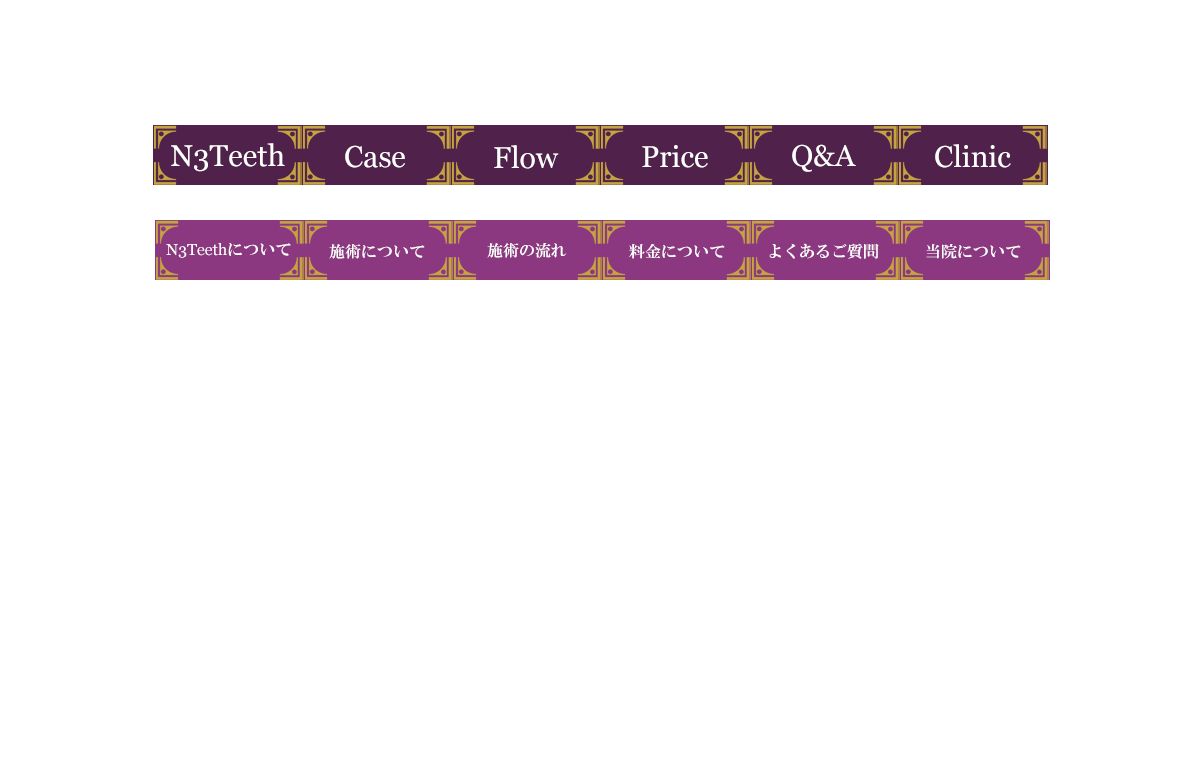
<style>
.page{position:relative;width:1200px;height:768px;background:#ffffff}
.page>*{position:absolute;margin:0}
.t1{font:30px "Georgia";color:#ffffff}
.t2{font:16px "Georgia";color:#ffffff}
.t3{font:16px "HGMinchoE";color:#ffffff}
</style>
<div class="page">
<p class="t1" style="left:171px;top:143px;width:114px;height:29px">N3Teeth</p>
<p class="t1" style="left:345px;top:145px;width:60px;height:23px">Case</p>
<p class="t1" style="left:494px;top:145px;width:65px;height:24px">Flow</p>
<p class="t1" style="left:642px;top:145px;width:66px;height:23px">Price</p>
<p class="t1" style="left:792px;top:144px;width:64px;height:28px">Q&amp;A</p>
<p class="t1" style="left:935px;top:144px;width:76px;height:24px">Clinic</p>
<p class="t2" style="left:166px;top:243px;width:125px;height:15px">N3Teeth<span class="t3">について</span></p>
<p class="t3" style="left:329px;top:244px;width:96px;height:15px">施術について</p>
<p class="t3" style="left:487px;top:243px;width:80px;height:15px">施術の流れ</p>
<p class="t3" style="left:629px;top:243px;width:96px;height:16px">料金について</p>
<p class="t3" style="left:769px;top:243px;width:110px;height:16px">よくあるご質問</p>
<p class="t3" style="left:926px;top:244px;width:95px;height:15px">当院について</p>
</div>
